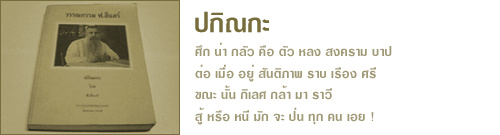
<style>
.page{position:relative;width:500px;height:135px;background:#ffffff}
.page>*{position:absolute;margin:0}
.t1{font:36px "DSELardPhrao";letter-spacing:0.01em;color:#776d3c}
.t2{font:18px "DSELardPhrao";letter-spacing:0.01em;color:#a09976}
</style>
<div class="page">
<p class="t1" style="left:195px;top:11px;width:74px;height:22px">»¡Ô³¡Ð</p>
<p class="t2" style="left:195px;top:42px;width:197px;height:83px">ÈÖ¡ ¹èÒ ¡ÅÑÇ ¤×Í µÑÇ ËÅ§ Ê§¤ÃÒÁ ºÒ»<br>µèÍ àÁ×èÍ ÍÂÙè ÊÑ¹µÔÀÒ¾ ÃÒº àÃ×Í§ ÈÃÕ<br>¢³Ð ¹Ñé¹ ¡ÔàÅÈ ¡ÅéÒ ÁÒ ÃÒÇÕ<br>ÊÙé ËÃ×Í Ë¹Õ ÁÑ¡ ¨Ð »è¹ ·Ø¡ ¤¹ àÍÂ !</p>
</div>
